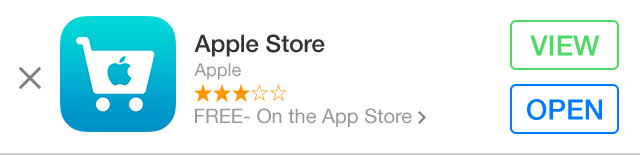
<style>
.page{position:relative;width:640px;height:155px;background:#ffffff}
.page>*{position:absolute;margin:0}
.t1{font:24px "HelveticaNeue-Medium";color:#333333}
.t2{font:28px "HelveticaNeue-Medium";color:#4cd964;text-transform:uppercase}
.t3{font:18px "HelveticaNeue";color:#999999}
.t4{font:28px "HelveticaNeue-Medium";color:#007aff;text-transform:uppercase}
.t5{font:20px "HelveticaNeue";color:#999999}
</style>
<div class="page">
<p class="t1" style="left:194px;top:34px;width:131px;height:23px">Apple Store</p>
<p class="t2" style="left:530px;top:35px;width:70px;height:21px">VIEW</p>
<p class="t3" style="left:194px;top:63px;width:47px;height:17px">Apple</p>
<p class="t4" style="left:527px;top:99px;width:75px;height:21px">OPEN</p>
<p class="t5" style="left:195px;top:108px;width:217px;height:19px">FREE- On the App Store</p>
</div>
